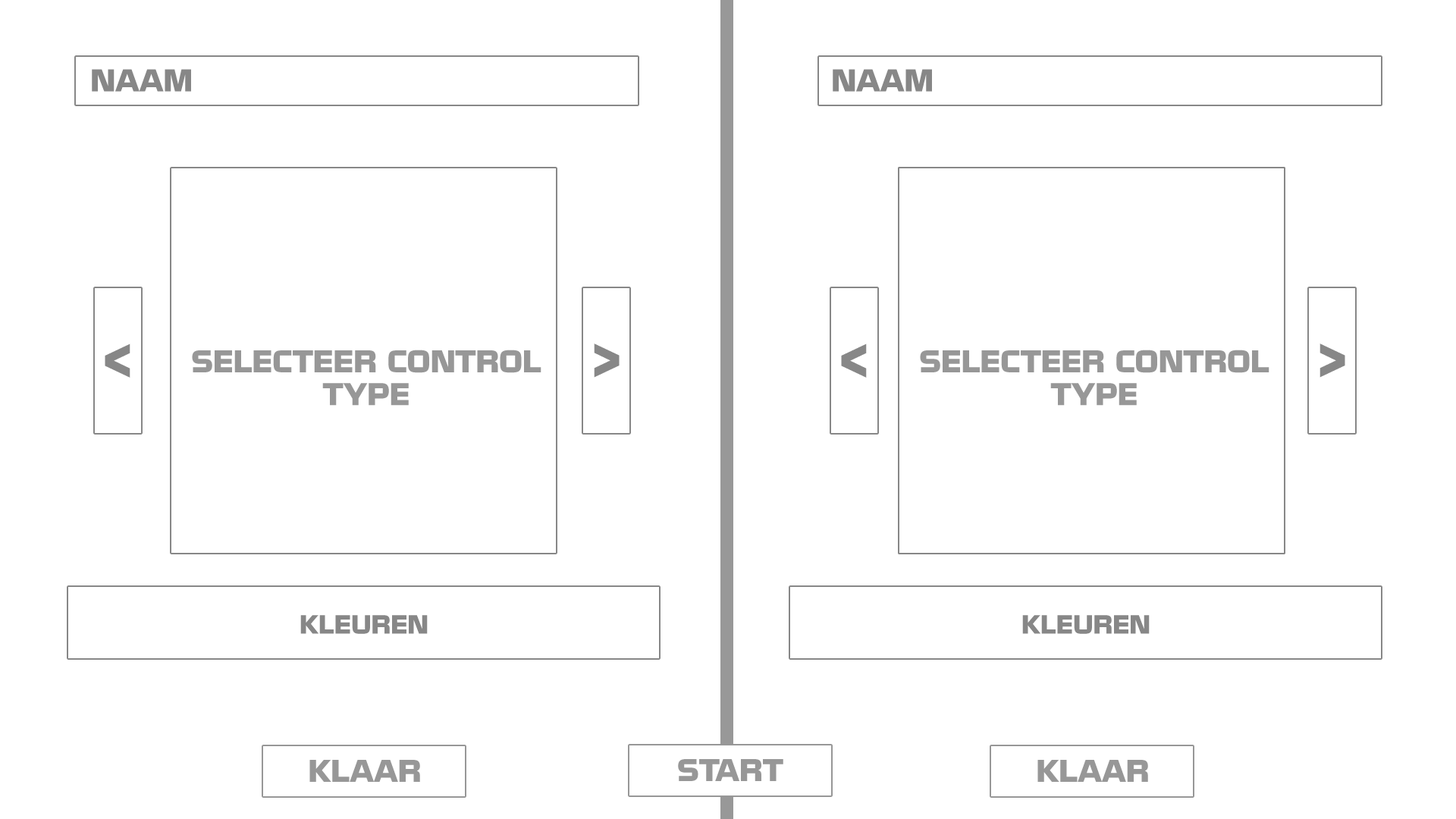
<style>
.page{position:relative;width:1456px;height:819px;background:#ffffff}
.page>*{position:absolute;margin:0}
.t1{font:27.3px "NissanOpti";color:#878787}
.t2{font:45.5px "NissanOpti";color:#878787}
.t3{font:27.3px "NissanOpti";color:#979797}
.t4{font:22.7px "NissanOpti";color:#878787}
</style>
<div class="page">
<p class="t1" style="left:92px;top:69px;width:99px;height:23px">NAAM</p>
<p class="t1" style="left:833px;top:69px;width:99px;height:23px">NAAM</p>
<p class="t2" style="left:105px;top:344px;width:25px;height:34px;rotate:180deg">&gt;</p>
<p class="t3" style="left:192px;top:350px;width:349px;height:56px;text-align:center">SELECTEER CONTROL<br>TYPE</p>
<p class="t2" style="left:594px;top:344px;width:26px;height:34px">&gt;</p>
<p class="t2" style="left:841px;top:344px;width:26px;height:34px;rotate:180deg">&gt;</p>
<p class="t3" style="left:920px;top:350px;width:349px;height:56px;text-align:center">SELECTEER CONTROL<br>TYPE</p>
<p class="t2" style="left:1319px;top:344px;width:26px;height:34px">&gt;</p>
<p class="t4" style="left:300px;top:615px;width:128px;height:19px">KLEUREN</p>
<p class="t4" style="left:1022px;top:615px;width:128px;height:19px">KLEUREN</p>
<p class="t3" style="left:309px;top:760px;width:111px;height:22px">KLAAR</p>
<p class="t3" style="left:678px;top:759px;width:105px;height:22px">START</p>
<p class="t3" style="left:1037px;top:760px;width:111px;height:22px">KLAAR</p>
</div>
